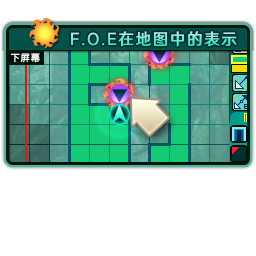
<style>
.page{position:relative;width:256px;height:256px;background:#ffffff}
.page>*{position:absolute;margin:0}
.t1{font:16px "HYWenHei-FEW";letter-spacing:0.105em;scale:0.97 1}
.t2{font:9.3px "FZY3--GB1-4";letter-spacing:0.105em;color:#ffffff;scale:0.97 1}
</style>
<div class="page">
<p class="t1" style="left:71px;top:31px;width:166px;height:16px">F.O.E在地图中的表示</p>
<p class="t2" style="left:10px;top:53px;width:30px;height:10px">下屏幕</p>
</div>
